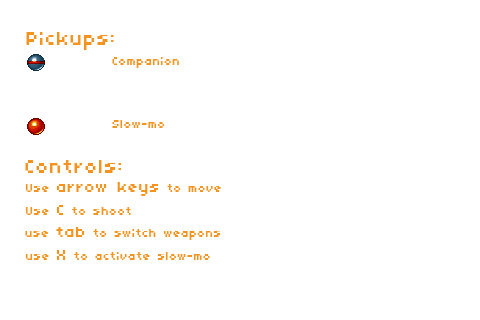
<style>
.page{position:relative;width:480px;height:320px;background:#ffffff}
.page>*{position:absolute;margin:0}
.t1{font:20px "04b03";letter-spacing:0.05em;color:#f5931f}
.t2{font:12px "04b03";letter-spacing:0.05em;color:#f5931f}
.t3{font:16px "04b03";letter-spacing:0.05em;color:#f5931f}
</style>
<div class="page">
<p class="t1" style="left:26px;top:32px;width:88px;height:18px">Pickups:</p>
<p class="t2" style="left:112px;top:57px;width:67px;height:11px">Companion</p>
<p class="t2" style="left:112px;top:120px;width:53px;height:8px">Slow-mo</p>
<p class="t1" style="left:25px;top:160px;width:96px;height:13px">Controls:</p>
<p class="t3" style="left:25px;top:182px;width:196px;height:14px"><span class="t2">Use </span>arrow keys<span class="t2"> to move</span></p>
<p class="t2" style="left:25px;top:205px;width:106px;height:10px">Use <span class="t3">C</span> to shoot</p>
<p class="t2" style="left:25px;top:227px;width:196px;height:13px">use <span class="t3">tab</span> to switch weapons</p>
<p class="t2" style="left:25px;top:250px;width:185px;height:10px">use <span class="t3">X</span> to activate slow-mo</p>
</div>
